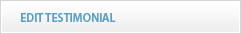
<style>
.page{position:relative;width:241px;height:34px}
.page>*{position:absolute;margin:0}
.t1{font:12px "MyriadPro-Semibold";letter-spacing:-0.01em;color:#5ca0c7;text-transform:uppercase}
</style>
<div class="page">
<p class="t1" style="left:21px;top:13px;width:95px;height:9px">Edit TESTIMONIAL</p>
</div>
